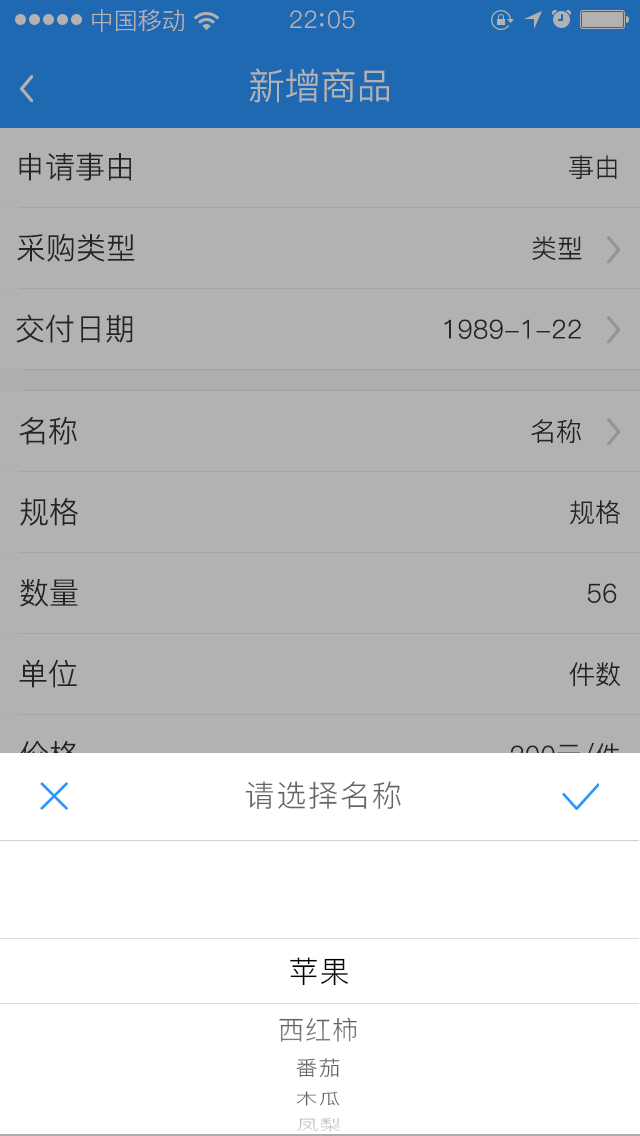
<style>
.page{position:relative;width:640px;height:1136px;background:#b2b2b2}
.page>*{position:absolute;margin:0}
.t1{font:24px "PingFang-SC-Regular";color:#b2b2b2}
.t2{font:24px "PingFang-SC-Regular";letter-spacing:0.03em;color:#b2b2b2}
.t3{font:36px "PingFang-SC-Regular";color:#b2b2b2}
.t4{font:30px "PingFang-SC-Regular";color:#333333}
.t5{font:26px "PingFang-SC-Regular";color:#333333}
.t6{font:30px "PingFang-SC-Regular"}
.t7{font:30px "PingFang-SC-Regular";letter-spacing:0.06em;color:#666666}
.t8{font:29.9px "PingFang-SC-Regular";letter-spacing:0.03em;color:#000000}
.t9{font:26px "PingFang-SC-Regular";letter-spacing:0.03em}
.t10{font:20.4px "PingFang-SC-Regular";letter-spacing:0.03em;color:#626262;scale:1.08 1}
.t11{font:15.3px "PingFang-SC-Regular";letter-spacing:0.03em;color:#626262;scale:1.45 1}
.t12{font:14.7px "PingFang-SC-Regular";letter-spacing:0.03em;color:#c5c5c5;scale:1.51 1}
</style>
<div class="page">
<p class="t1" style="left:92px;top:9px;width:92px;height:23px">中国移动</p>
<p class="t2" style="left:290px;top:10px;width:65px;height:19px">22 05</p>
<p class="t3" style="left:249px;top:68px;width:140px;height:35px">新增商品</p>
<p class="t4" style="left:19px;top:152px;width:112px;height:29px">申请事由</p>
<p class="t5" style="left:569px;top:155px;width:48px;height:24px">事由</p>
<p class="t4" style="left:17px;top:233px;width:118px;height:29px">采购类型</p>
<p class="t5" style="left:532px;top:236px;width:50px;height:24px">类型</p>
<p class="t4" style="left:16px;top:314px;width:117px;height:29px">交付日期</p>
<p class="t5" style="left:444px;top:319px;width:137px;height:20px">1989-1-22</p>
<p class="t4" style="left:19px;top:416px;width:58px;height:29px">名称</p>
<p class="t5" style="left:531px;top:419px;width:50px;height:24px">名称</p>
<p class="t4" style="left:20px;top:497px;width:58px;height:29px">规格</p>
<p class="t5" style="left:570px;top:500px;width:50px;height:25px">规格</p>
<p class="t4" style="left:20px;top:578px;width:58px;height:29px">数量</p>
<p class="t5" style="left:587px;top:583px;width:30px;height:20px">56</p>
<p class="t4" style="left:19px;top:659px;width:58px;height:29px">单位</p>
<p class="t5" style="left:569px;top:662px;width:52px;height:25px">件数</p>
<p class="t6" style="left:20px;top:740px;width:58px;height:29px">价格</p>
<p class="t7" style="left:245px;top:781px;width:156px;height:28px">请选择名称</p>
<p class="t8" style="left:290px;top:957px;width:59px;height:29px">苹果</p>
<p class="t9" style="left:279px;top:1017px;width:78px;height:25px">西红柿</p>
<p class="t10" style="left:296px;top:1058px;width:44px;height:19px">番茄</p>
<p class="t11" style="left:297px;top:1091px;width:43px;height:15px">木瓜</p>
<p class="t12" style="left:297px;top:1118px;width:43px;height:14px">凤梨</p>
</div>
